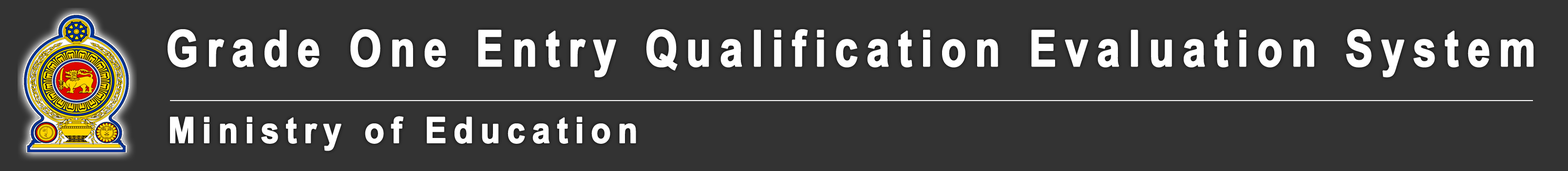
<style>
.page{position:relative;width:1568px;height:171px;background:#333333}
.page>*{position:absolute;margin:0}
.t1{font:50.2px "Arial-BoldMT";letter-spacing:0.19em;color:#ffffff;font-weight:bold;scale:0.82 1}
.t2{font:35.9px "Arial-BoldMT";letter-spacing:0.19em;color:#ffffff;font-weight:bold;scale:0.9 1}
</style>
<div class="page">
<p class="t1" style="left:168px;top:29px;width:1366px;height:49px">Grade One Entry Qualification Evaluation System</p>
<p class="t2" style="left:170px;top:116px;width:466px;height:35px">Ministry of Education</p>
</div>
